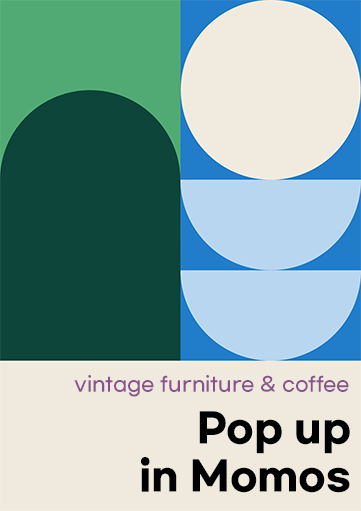
<style>
.page{position:relative;width:361px;height:511px;background:#f0eade}
.page>*{position:absolute;margin:0}
.t1{font:20px "GmarketSansTTFMedium";color:#88538d}
.t2{font:39.9px/47.8px "GmarketSansTTFBold";color:#000000}
</style>
<div class="page">
<p class="t1" style="left:74px;top:375px;width:275px;height:22px">vintage furniture &amp; coffee</p>
<p class="t2" style="left:140px;top:411px;width:210px;height:82px;text-align:right">Pop up<br>in Momos</p>
</div>
